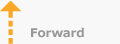
<style>
.page{position:relative;width:120px;height:44px;background:#f8f8f8}
.page>*{position:absolute;margin:0}
.t1{font:12px "Verdana-Bold";letter-spacing:-0.02em;color:#979797}
</style>
<div class="page">
<p class="t1" style="left:31px;top:27px;width:53px;height:11px">Forward</p>
</div>
